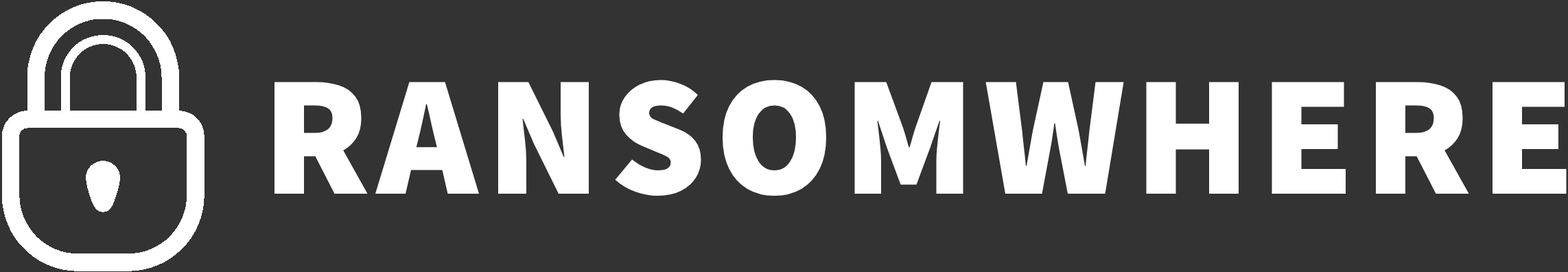
<style>
.page{position:relative;width:1568px;height:272px;background:#333333}
.page>*{position:absolute;margin:0}
.t1{font:171.6px "SourceSansPro-Black";letter-spacing:0.05em;color:#ffffff}
</style>
<div class="page">
<p class="t1" style="left:274px;top:80px;width:1293px;height:116px">RANSOMWHERE</p>
</div>
